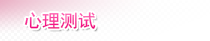
<style>
.page{position:relative;width:210px;height:41px;background:#ffffff}
.page>*{position:absolute;margin:0}
.t1{font:18px "SimHei"}
</style>
<div class="page">
<p class="t1" style="left:24px;top:12px;width:72px;height:17px">心理测试</p>
</div>
